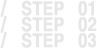
<style>
.page{position:relative;width:97px;height:48px;background:#ffffff}
.page>*{position:absolute;margin:0}
.t1{font:18px "HYgtrE";letter-spacing:-0.04em;color:#e6e6e6;font-weight:bold;scale:0.85 1}
</style>
<div class="page">
<p class="t1" style="left:0px;top:0px;width:94px;height:17px">/   STEP   01</p>
<p class="t1" style="left:0px;top:15px;width:97px;height:18px">/   STEP   02</p>
<p class="t1" style="left:0px;top:31px;width:96px;height:18px">/   STEP   03</p>
</div>
